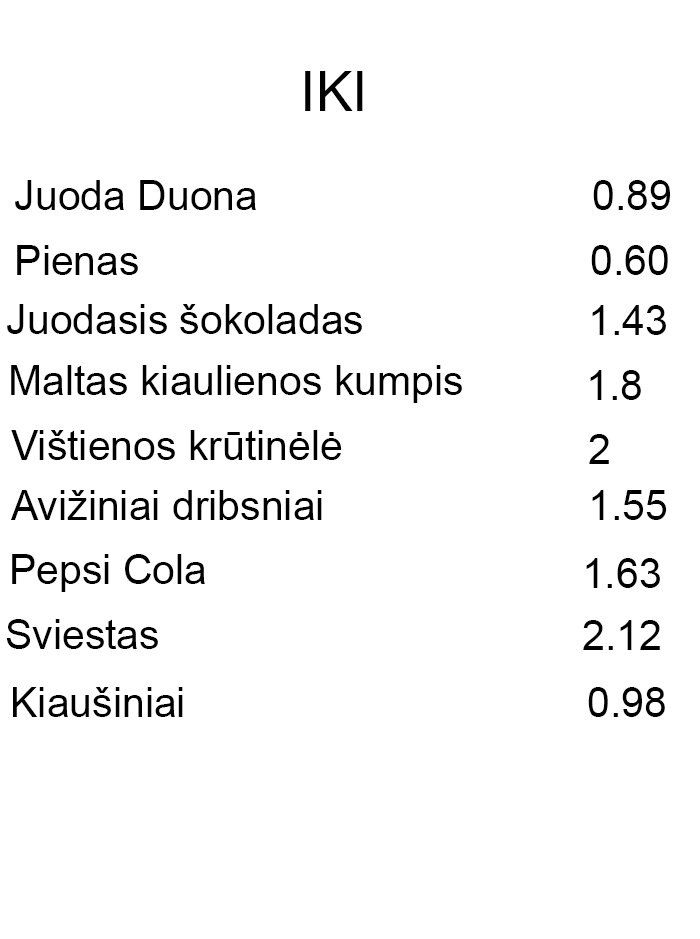
<style>
.page{position:relative;width:700px;height:939px;background:#ffffff}
.page>*{position:absolute;margin:0}
.t1{font:54.6px "ArialMT";color:#000000}
.t2{font:41px "ArialMT";color:#000000}
</style>
<div class="page">
<p class="t1" style="left:305px;top:71px;width:58px;height:40px">IKI</p>
<p class="t2" style="left:15px;top:180px;width:241px;height:30px">Juoda Duona</p>
<p class="t2" style="left:593px;top:180px;width:77px;height:30px">0.89</p>
<p class="t2" style="left:17px;top:245px;width:121px;height:30px">Pienas</p>
<p class="t2" style="left:591px;top:245px;width:77px;height:30px">0.60</p>
<p class="t2" style="left:7px;top:304px;width:355px;height:30px">Juodasis šokoladas</p>
<p class="t2" style="left:592px;top:305px;width:74px;height:30px">1.43</p>
<p class="t2" style="left:11px;top:365px;width:451px;height:38px">Maltas kiaulienos kumpis</p>
<p class="t2" style="left:590px;top:370px;width:51px;height:30px">1.8</p>
<p class="t2" style="left:11px;top:430px;width:331px;height:30px">Vištienos krūtinėlė</p>
<p class="t2" style="left:589px;top:434px;width:20px;height:30px">2</p>
<p class="t2" style="left:11px;top:490px;width:311px;height:30px">Avižiniai dribsniai</p>
<p class="t2" style="left:592px;top:490px;width:75px;height:30px">1.55</p>
<p class="t2" style="left:12px;top:554px;width:193px;height:38px">Pepsi Cola</p>
<p class="t2" style="left:586px;top:558px;width:74px;height:30px">1.63</p>
<p class="t2" style="left:6px;top:619px;width:152px;height:30px">Sviestas</p>
<p class="t2" style="left:583px;top:620px;width:77px;height:30px">2.12</p>
<p class="t2" style="left:13px;top:687px;width:170px;height:30px">Kiaušiniai</p>
<p class="t2" style="left:588px;top:687px;width:77px;height:30px">0.98</p>
</div>
